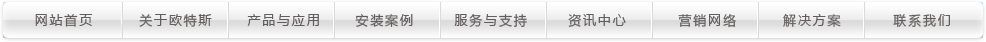
<style>
.page{position:relative;width:986px;height:42px}
.page>*{position:absolute;margin:0}
.t1{font:13px "MicrosoftYaHei";letter-spacing:0.14em;color:#625e5d}
</style>
<div class="page">
<p class="t1" style="left:35px;top:13px;width:915px;height:15px">网站首页        关于欧特斯      产品与应用      安装案例       服务与支持       资讯中心         营销网络        解决方案         联系我们</p>
</div>
